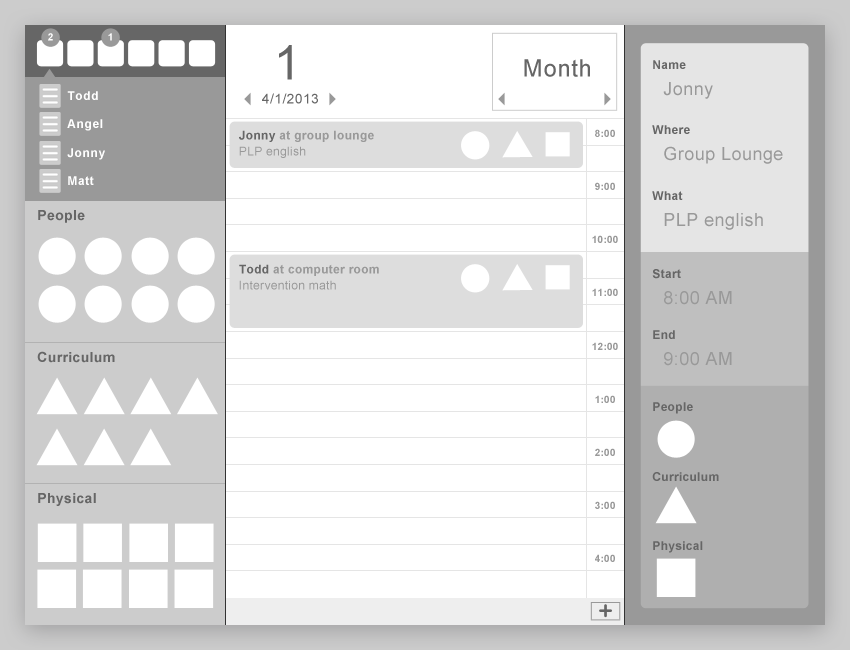
<style>
.page{position:relative;width:850px;height:650px;background:#ffffff}
.page>*{position:absolute;margin:0}
.t1{font:10px "Arial-BoldMT";letter-spacing:0.025em;color:#ffffff}
.t2{font:48px "ArialMT";letter-spacing:0.025em;color:#666666}
.t3{font:24px "ArialMT";letter-spacing:0.025em;color:#666666}
.t4{font:12px "Arial-BoldMT";letter-spacing:0.025em;color:#666666}
.t5{font:18px "ArialMT";letter-spacing:0.025em;color:#999999}
.t6{font:12px "Arial-BoldMT";letter-spacing:0.05em;color:#ffffff}
.t7{font:14px "ArialMT";letter-spacing:0.025em;color:#666666}
.t8{font:12px/16px "Arial-BoldMT";letter-spacing:0.025em;color:#999999}
.t9{font:12px/16px "Arial-BoldMT";letter-spacing:0.025em;color:#666666}
.t10{font:12px/16px "ArialMT";letter-spacing:0.025em;color:#999999}
.t11{font:10px "Arial-BoldMT";letter-spacing:0.025em;color:#999999}
.t12{font:14px "Arial-BoldMT";letter-spacing:0.025em;color:#666666}
</style>
<div class="page">
<p class="t1" style="left:48px;top:33px;width:5px;height:8px">2</p>
<p class="t1" style="left:108px;top:33px;width:4px;height:8px">1</p>
<p class="t2" style="left:279px;top:45px;width:13px;height:35px">1</p>
<p class="t3" style="left:524px;top:59px;width:66px;height:18px">Month</p>
<p class="t4" style="left:653px;top:60px;width:33px;height:9px">Name</p>
<p class="t5" style="left:663px;top:82px;width:50px;height:17px">Jonny</p>
<p class="t6" style="left:67px;top:91px;width:31px;height:9px">Todd</p>
<p class="t7" style="left:262px;top:93px;width:56px;height:11px">4/1/2013</p>
<p class="t6" style="left:67px;top:119px;width:36px;height:12px">Angel</p>
<p class="t4" style="left:652px;top:125px;width:38px;height:9px">Where</p>
<p class="t8" style="left:239px;top:130px;width:135px;height:28px"><span class="t9">Jonny </span>at group lounge<br><span class="t10">PLP english</span></p>
<p class="t11" style="left:595px;top:129px;width:20px;height:8px">8:00</p>
<p class="t6" style="left:67px;top:148px;width:38px;height:12px">Jonny</p>
<p class="t5" style="left:664px;top:146px;width:119px;height:18px">Group Lounge</p>
<p class="t6" style="left:68px;top:176px;width:26px;height:9px">Matt</p>
<p class="t11" style="left:595px;top:182px;width:20px;height:8px">9:00</p>
<p class="t4" style="left:652px;top:191px;width:31px;height:9px">What</p>
<p class="t12" style="left:38px;top:210px;width:47px;height:13px">People</p>
<p class="t5" style="left:664px;top:213px;width:99px;height:17px">PLP english</p>
<p class="t11" style="left:592px;top:235px;width:26px;height:8px">10:00</p>
<p class="t10" style="left:239px;top:264px;width:140px;height:26px"><span class="t9">Todd </span><span class="t8">at computer room<br></span>Intervention math</p>
<p class="t4" style="left:652px;top:269px;width:29px;height:10px">Start</p>
<p class="t11" style="left:592px;top:288px;width:26px;height:8px">11:00</p>
<p class="t5" style="left:664px;top:291px;width:68px;height:14px">8:00 AM</p>
<p class="t11" style="left:592px;top:342px;width:26px;height:8px">12:00</p>
<p class="t4" style="left:653px;top:330px;width:22px;height:9px">End</p>
<p class="t12" style="left:37px;top:351px;width:78px;height:12px">Curriculum</p>
<p class="t5" style="left:664px;top:352px;width:68px;height:14px">9:00 AM</p>
<p class="t11" style="left:595px;top:395px;width:20px;height:8px">1:00</p>
<p class="t4" style="left:653px;top:402px;width:40px;height:12px">People</p>
<p class="t11" style="left:595px;top:448px;width:20px;height:8px">2:00</p>
<p class="t4" style="left:652px;top:472px;width:67px;height:9px">Curriculum</p>
<p class="t12" style="left:38px;top:493px;width:58px;height:13px">Physical</p>
<p class="t11" style="left:595px;top:501px;width:20px;height:8px">3:00</p>
<p class="t4" style="left:653px;top:541px;width:50px;height:12px">Physical</p>
<p class="t11" style="left:595px;top:554px;width:20px;height:8px">4:00</p>
</div>
